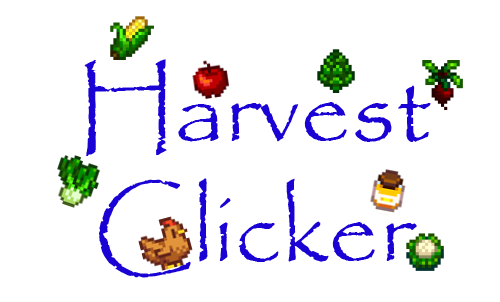
<style>
.page{position:relative;width:500px;height:302px;background:#ffffff}
.page>*{position:absolute;margin:0}
.t1{font:100px "Papyrus-Regular";color:#1b02d4}
</style>
<div class="page">
<p class="t1" style="left:84px;top:59px;width:347px;height:219px;text-align:center">Harvest<br>Clicker</p>
</div>
